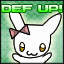
<style>
.page{position:relative;width:64px;height:64px;background:#fcfcfc}
.page>*{position:absolute;margin:0}
.t1{font:7px "M42_FLIGHT-721"}
</style>
<div class="page">
<p class="t1" style="left:1px;top:5px;width:61px;height:7px">DEF UP!</p>
</div>
